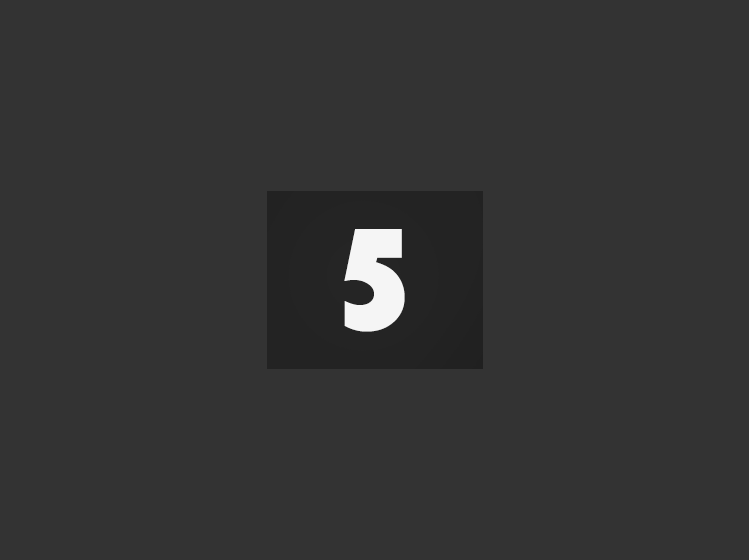
<style>
.page{position:relative;width:749px;height:560px;background:#333333}
.page>*{position:absolute;margin:0}
.t1{font:150px "Bauhaus93";color:#f5f5f5;font-variant:small-caps}
</style>
<div class="page">
<p class="t1" style="left:344px;top:229px;width:61px;height:103px">5</p>
</div>
